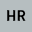
<style>
.page{position:relative;width:32px;height:32px;background:#b6bec0}
.page>*{position:absolute;margin:0}
.t1{font:14px "NotoSansKR-Bold";color:#000000}
</style>
<div class="page">
<p class="t1" style="left:7px;top:10px;width:19px;height:11px">HR</p>
</div>
